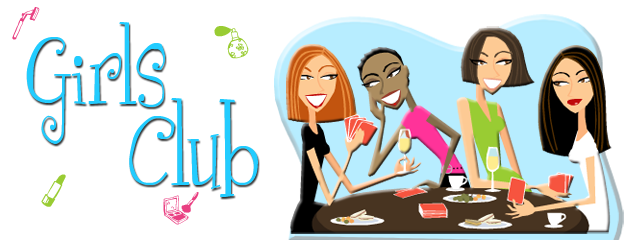
<style>
.page{position:relative;width:625px;height:240px;background:#ffffff}
.page>*{position:absolute;margin:0}
.t1{font:32.7px "Beauty-Spot-Regular";letter-spacing:-0.025em;color:#e94082}
.t2{font:106.2px "GirlsareWeird";letter-spacing:-0.025em;color:#22ccff}
.t3{font:32.7px "Beauty-Spot-Regular";letter-spacing:-0.025em;color:#99cc33}
.t4{font:112.9px "GirlsareWeird";letter-spacing:-0.025em;color:#22ccff}
</style>
<div class="page">
<p class="t1" style="left:12px;top:7px;width:28px;height:33px">f</p>
<p class="t2" style="left:26px;top:22px;width:139px;height:122px">Girls</p>
<p class="t3" style="left:214px;top:26px;width:35px;height:33px">c</p>
<p class="t4" style="left:129px;top:98px;width:129px;height:99px">Club</p>
<p class="t3" style="left:41px;top:174px;width:25px;height:33px">a</p>
<p class="t1" style="left:163px;top:192px;width:36px;height:33px">b</p>
</div>
